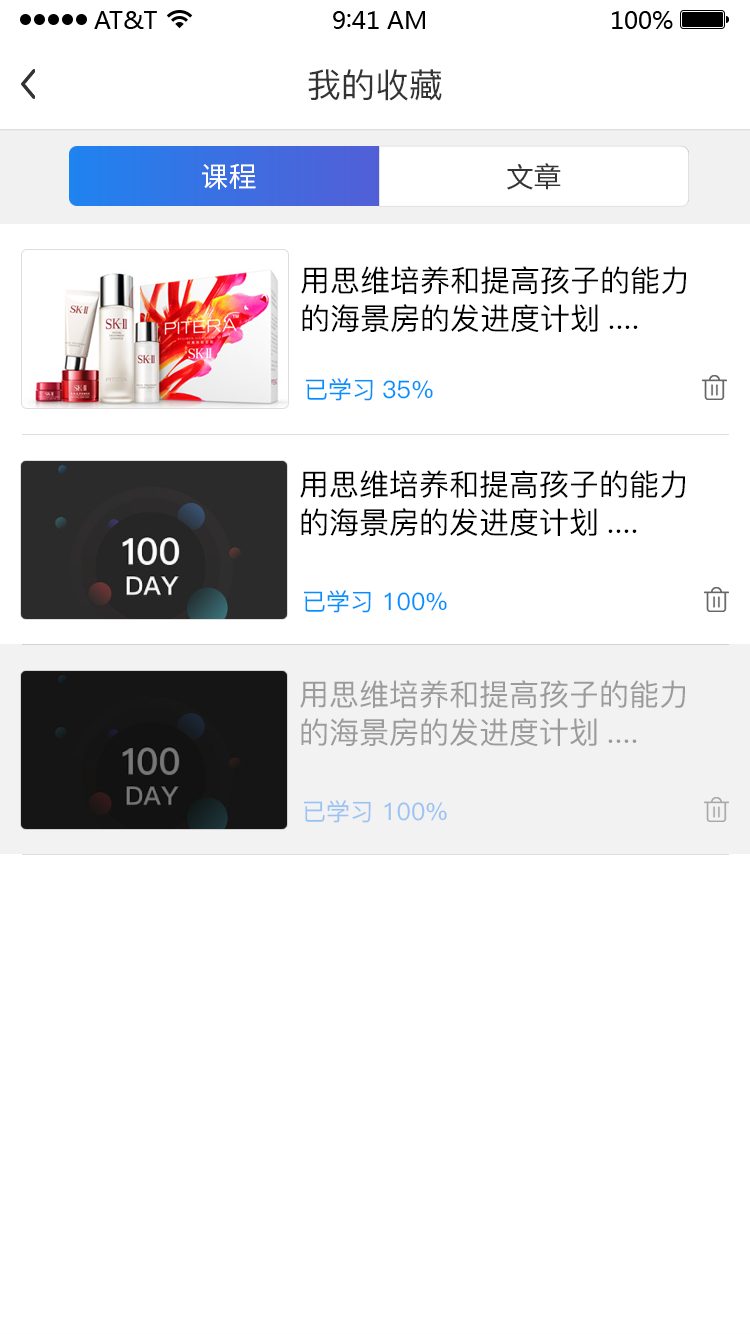
<style>
.page{position:relative;width:750px;height:1334px;background:#ffffff}
.page>*{position:absolute;margin:0}
.t1{font:34px "PingFang-SC-Medium";color:#333333}
.t2{font:28px "SourceHanSansCN-Regular";color:#ffffff}
.t3{font:28px "SourceHanSansCN-Regular";color:#333333}
.t4{font:30px/38px "PingFang-SC-Medium";color:#000000}
.t5{font:24px "PingFang-SC-Medium";color:#0090ff}
.t6{font:30px/38px "PingFang-SC-Medium";color:#9b9b9b}
.t7{font:24px "PingFang-SC-Medium";color:#9bc2f2}
</style>
<div class="page">
<p class="t1" style="left:308px;top:69px;width:134px;height:32px">我的收藏</p>
<p class="t2" style="left:202px;top:163px;width:54px;height:27px">课程</p>
<p class="t3" style="left:507px;top:163px;width:54px;height:27px">文章</p>
<p class="t4" style="left:301px;top:266px;width:386px;height:66px">用思维培养和提高孩子的能力<br>的海景房的发进度计划....</p>
<p class="t5" style="left:305px;top:378px;width:128px;height:23px">已学习35%</p>
<p class="t4" style="left:300px;top:470px;width:386px;height:66px">用思维培养和提高孩子的能力<br>的海景房的发进度计划....</p>
<p class="t5" style="left:303px;top:590px;width:144px;height:23px">已学习 100%</p>
<p class="t6" style="left:300px;top:680px;width:386px;height:66px">用思维培养和提高孩子的能力<br>的海景房的发进度计划....</p>
<p class="t7" style="left:303px;top:800px;width:144px;height:23px">已学习 100%</p>
</div>
